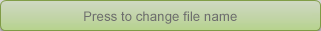
<style>
.page{position:relative;width:321px;height:31px}
.page>*{position:absolute;margin:0}
.t1{font:13.3px "ArialMT";color:#6e6e6e}
</style>
<div class="page">
<p class="t1" style="left:84px;top:11px;width:153px;height:13px">Press to change file name</p>
</div>
